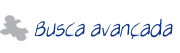
<style>
.page{position:relative;width:180px;height:53px;background:#ffffff}
.page>*{position:absolute;margin:0}
.t1{font:24px "AirCutLight";color:#0b3788}
</style>
<div class="page">
<p class="t1" style="left:34px;top:18px;width:139px;height:20px">Busca avancada</p>
</div>
